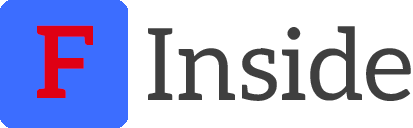
<style>
.page{position:relative;width:413px;height:128px;background:#ffffff}
.page>*{position:absolute;margin:0}
.t1{font:100px "SVN-AleoBold";color:#df0014}
.t2{font:100px "SVN-AleoRegular";color:#3f3f3f}
</style>
<div class="page">
<p class="t1" style="left:37px;top:25px;width:56px;height:73px">F</p>
<p class="t2" style="left:148px;top:26px;width:263px;height:75px">Inside</p>
</div>
